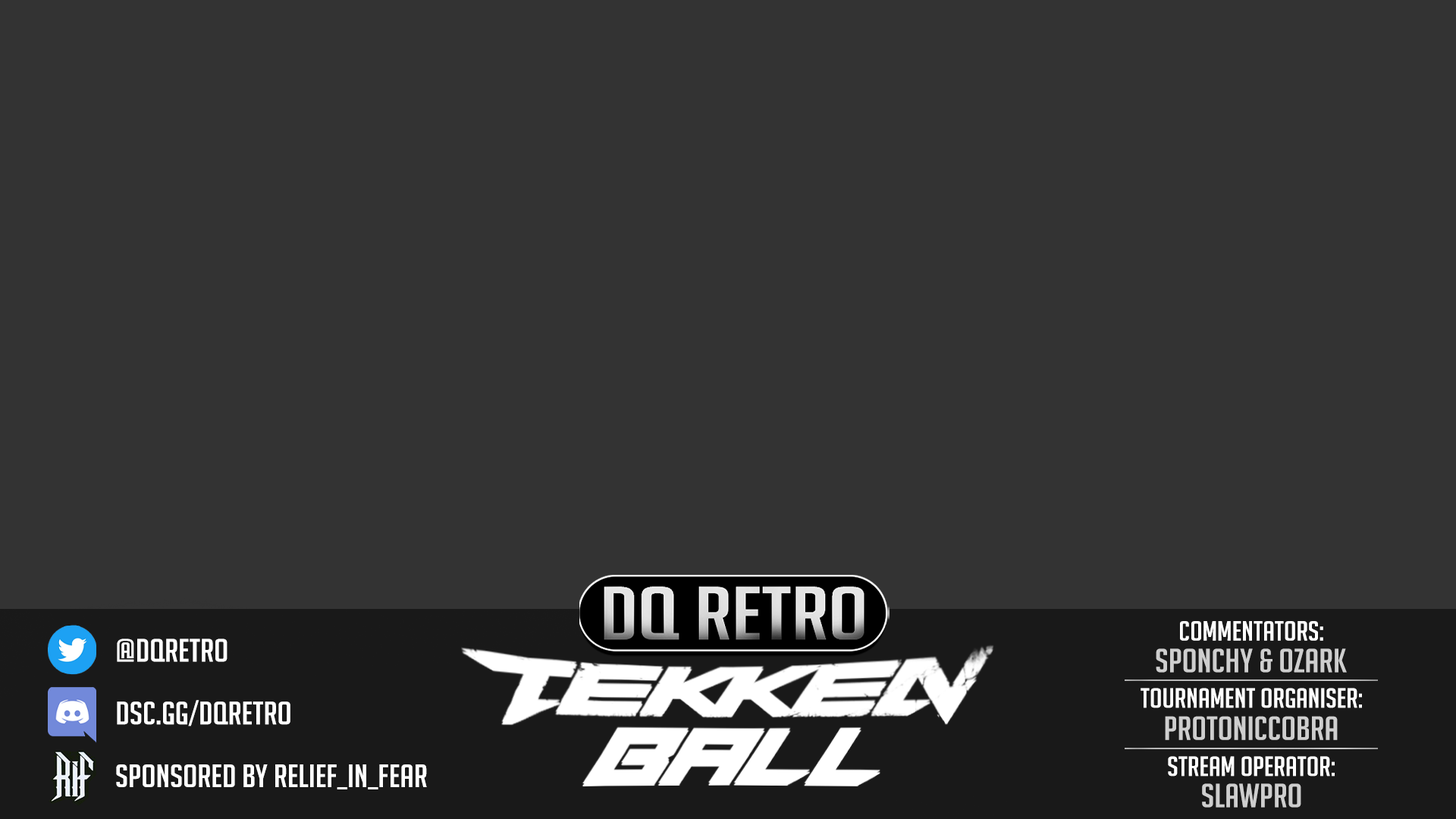
<style>
.page{position:relative;width:1456px;height:819px;background:#333333}
.page>*{position:absolute;margin:0}
.t1{font:27.1px "BigNoodleTitling";color:#ffffff;scale:1.14 1}
.t2{font:31.7px "BigNoodleTitling";color:#ffffff;scale:1.14 1}
.t3{font:32.7px "BigNoodleTitling";color:#cecece;scale:1.14 1}
</style>
<div class="page">
<p class="t1" style="left:1180px;top:621px;width:143px;height:20px">Commentators:</p>
<p class="t2" style="left:117px;top:639px;width:110px;height:23px">@DQRETRO</p>
<p class="t3" style="left:1156px;top:648px;width:191px;height:25px">sponchy &amp; ozark</p>
<p class="t1" style="left:1141px;top:688px;width:221px;height:20px">Tournament organiser:</p>
<p class="t2" style="left:117px;top:700px;width:173px;height:26px">dsc.gg/dqretro</p>
<p class="t3" style="left:1165px;top:716px;width:173px;height:24px">protoniccobra</p>
<p class="t1" style="left:1168px;top:756px;width:167px;height:21px">Stream operator:</p>
<p class="t2" style="left:116px;top:764px;width:311px;height:25px">SPONSORED BY relief_IN_FEAR</p>
<p class="t3" style="left:1202px;top:783px;width:99px;height:25px">slawpro</p>
</div>
